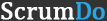
<style>
.page{position:relative;width:107px;height:21px;background:#333333}
.page>*{position:absolute;margin:0}
.t1{font:26px "Cambria";color:#ffffff;font-weight:bold}
.t2{font:26px "Cambria";color:#26a7e6;font-weight:bold}
</style>
<div class="page">
<p class="t1" style="left:1px;top:2px;width:104px;height:18px">Scrum<span class="t2">Do</span></p>
</div>
